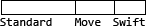
<style>
.page{position:relative;width:146px;height:26px;background:#ffffff}
.page>*{position:absolute;margin:0}
.t1{font:12px "Consolas";color:#000000}
</style>
<div class="page">
<p class="t1" style="left:113px;top:17px;width:32px;height:9px">Swift</p>
<p class="t1" style="left:0px;top:18px;width:52px;height:8px">Standard</p>
<p class="t1" style="left:74px;top:18px;width:27px;height:8px">Move</p>
</div>
